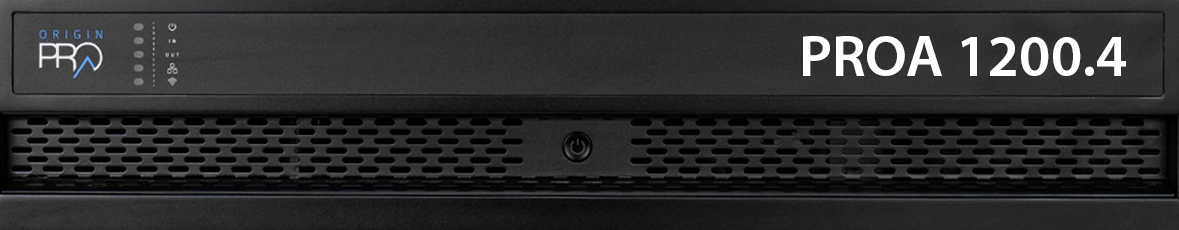
<style>
.page{position:relative;width:1179px;height:230px}
.page>*{position:absolute;margin:0}
.t1{font:59px "MyriadPro-Semibold";color:#ffffff}
</style>
<div class="page">
<p class="t1" style="left:803px;top:36px;width:323px;height:40px">PROA 1200.4</p>
</div>
